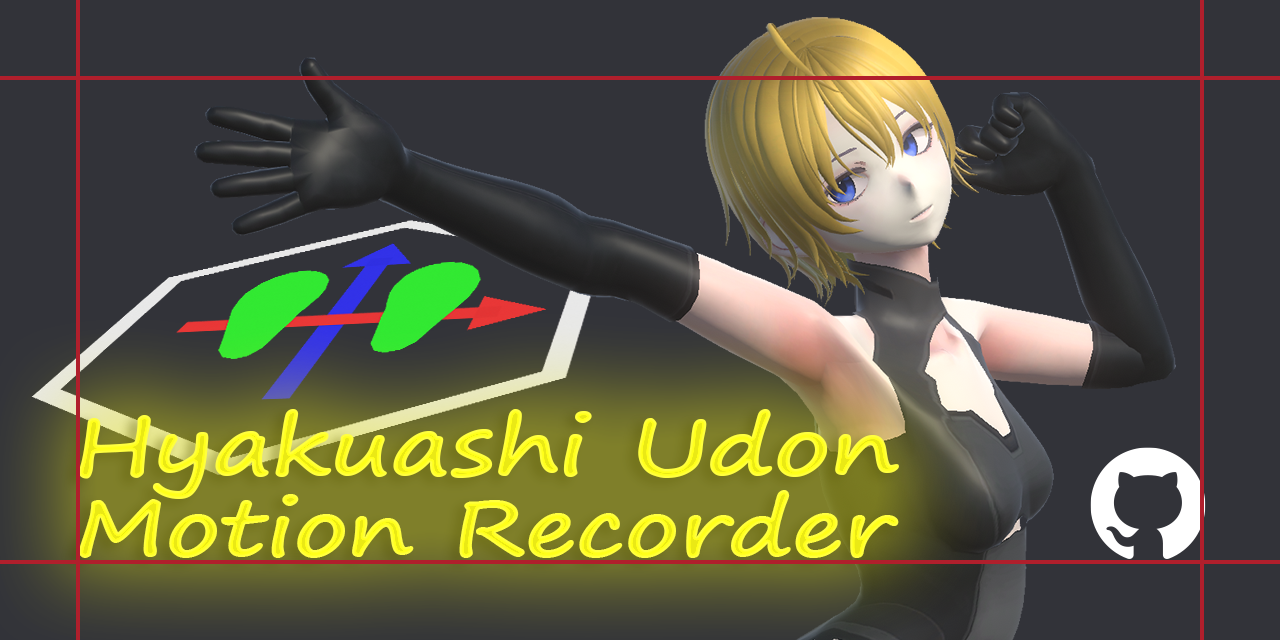
<style>
.page{position:relative;width:1280px;height:640px;background:#323339}
.page>*{position:absolute;margin:0}
.t1{font:74.5px "SegoePrint-Bold";color:#eae915;scale:1.26 1}
</style>
<div class="page">
<p class="t1" style="left:79px;top:409px;width:820px;height:149px;text-align:center">Hyakuashi Udon<br>Motion Recorder</p>
</div>
